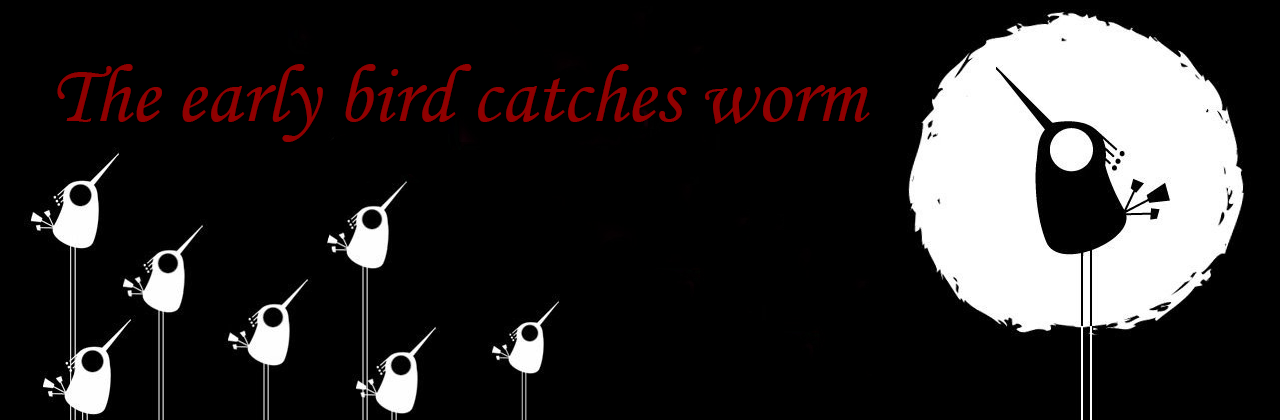
<style>
.page{position:relative;width:1280px;height:420px;background:#000000}
.page>*{position:absolute;margin:0}
.t1{font:83.3px "MonotypeCorsiva";color:#900000}
</style>
<div class="page">
<p class="t1" style="left:57px;top:64px;width:813px;height:78px">The early bird catches worm</p>
</div>
